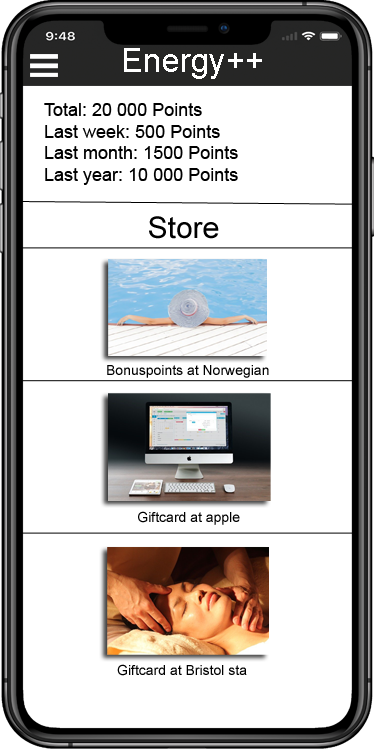
<style>
.page{position:relative;width:374px;height:749px;background:#ffffff}
.page>*{position:absolute;margin:0}
.t1{font:33.1px "ArialMT";color:#ffffff}
.t2{font:18px "ArialMT";color:#000000}
.t3{font:30px "ArialMT";color:#000000}
.t4{font:14px "ArialMT";color:#000000}
</style>
<div class="page">
<p class="t1" style="left:124px;top:48px;width:138px;height:31px">Energy++</p>
<p class="t2" style="left:44px;top:103px;width:194px;height:82px">Total: 20 000 Points<br>Last week: 500 Points<br>Last month: 1500 Points<br>Last year: 10 000 Points</p>
<p class="t3" style="left:149px;top:216px;width:70px;height:23px">Store</p>
<p class="t4" style="left:107px;top:365px;width:162px;height:13px">Bonuspoints at Norwegian</p>
<p class="t4" style="left:138px;top:511px;width:102px;height:14px">Giftcard at apple</p>
<p class="t4" style="left:117px;top:664px;width:130px;height:12px">Giftcard at Bristol sta</p>
</div>
